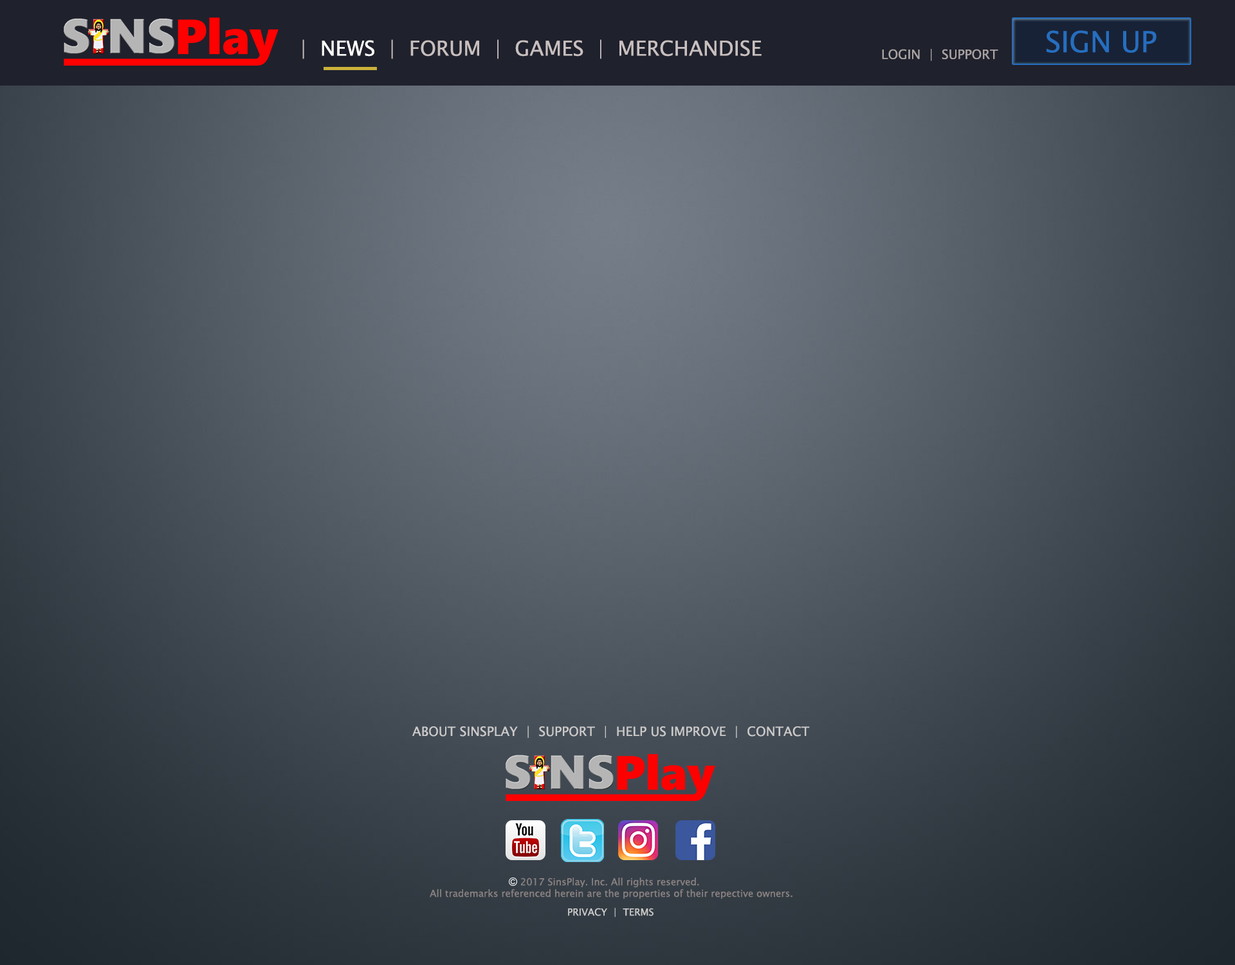
<style>
.page{position:relative;width:1235px;height:965px}
.page>*{position:absolute;margin:0}
.t1{font:20.6px "LucidaSansUnicode";color:#c8bfbf}
.t2{font:20.6px "LucidaSansUnicode";color:#ffffff}
.t3{font:29px "LucidaSansUnicode";color:#266ebf}
.t4{font:12.9px "LucidaSansUnicode";color:#aba4a4}
.t5{font:12.9px "LucidaSansUnicode";color:#cccaca}
.t6{font:9.7px "LucidaSansUnicode";color:#898181}
.t7{font:9.7px "LucidaSansUnicode";color:#cccaca}
</style>
<div class="page">
<p class="t1" style="left:302px;top:39px;width:460px;height:20px">| <span class="t2"> NEWS</span>  |  FORUM  |  GAMES  |  MERCHANDISE</p>
<p class="t3" style="left:1047px;top:30px;width:110px;height:23px">SIGN UP</p>
<p class="t4" style="left:882px;top:49px;width:117px;height:12px">LOGIN  |  SUPPORT</p>
<p class="t5" style="left:412px;top:726px;width:398px;height:12px">ABOUT SINSPLAY  |  SUPPORT  |  HELP US IMPROVE  |  CONTACT</p>
<p class="t6" style="left:430px;top:878px;width:363px;height:21px;text-align:center">2017 SinsPlay. Inc. All rights reserved. <br>All trademarks referenced herein are the properties of their repective owners.</p>
<p class="t7" style="left:568px;top:908px;width:86px;height:10px">PRIVACY  |  TERMS</p>
</div>
